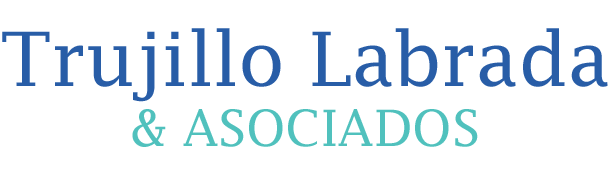
<style>
.page{position:relative;width:610px;height:180px;background:#ffffff}
.page>*{position:absolute;margin:0}
.t1{font:75px "LucidaFax";color:#285da7}
.t2{font:50px "LucidaFax";color:#50c1bd}
</style>
<div class="page">
<p class="t1" style="left:2px;top:28px;width:606px;height:119px;text-align:center">Trujillo Labrada<br><span class="t2">&amp; ASOCIADOS</span></p>
</div>
